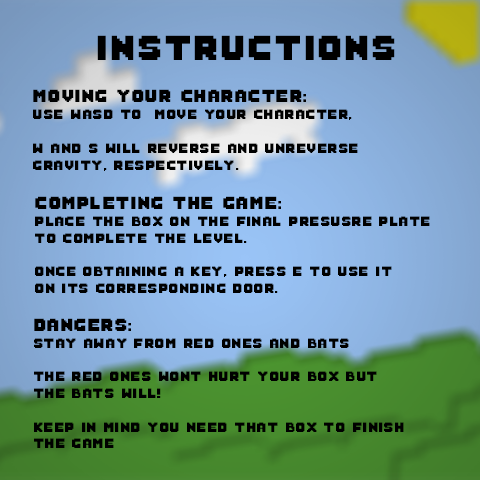
<style>
.page{position:relative;width:480px;height:480px}
.page>*{position:absolute;margin:0}
.t1{font:36px "Sabo-Filled";color:#000000}
.t2{font:14px "Sabo-Filled";color:#000000}
.t3{font:18px "Sabo-Filled";color:#000000}
</style>
<div class="page">
<p class="t1" style="left:97px;top:35px;width:298px;height:25px">Instructions</p>
<p class="t2" style="left:33px;top:89px;width:325px;height:82px"><span class="t3">Moving your character:<br></span>Use WASD to  move your character,<br><br>W and S will reverse and unreverse <br>gravity, respectively.</p>
<p class="t2" style="left:35px;top:196px;width:395px;height:97px"><span class="t3">Completing the game:<br></span>Place the box on the final Presusre plate <br>to complete the level.<br><br>Once obtaining a key, press E to use it <br>on its corresponding door.</p>
<p class="t2" style="left:34px;top:318px;width:370px;height:130px"><span class="t3">Dangers:<br></span>Stay away from red ones and bats<br><br>The red ones wont hurt your box but <br>the bats will!<br><br>Keep in mind you need that box to finish <br>the game</p>
</div>
